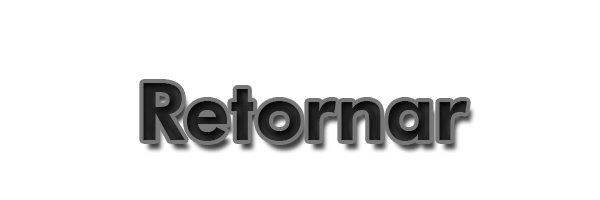
<style>
.page{position:relative;width:600px;height:200px;background:#ffffff}
.page>*{position:absolute;margin:0}
.t1{font:80px "FuturaBT-Heavy";color:#1f1f1f}
</style>
<div class="page">
<p class="t1" style="left:143px;top:83px;width:324px;height:58px">Retornar</p>
</div>
